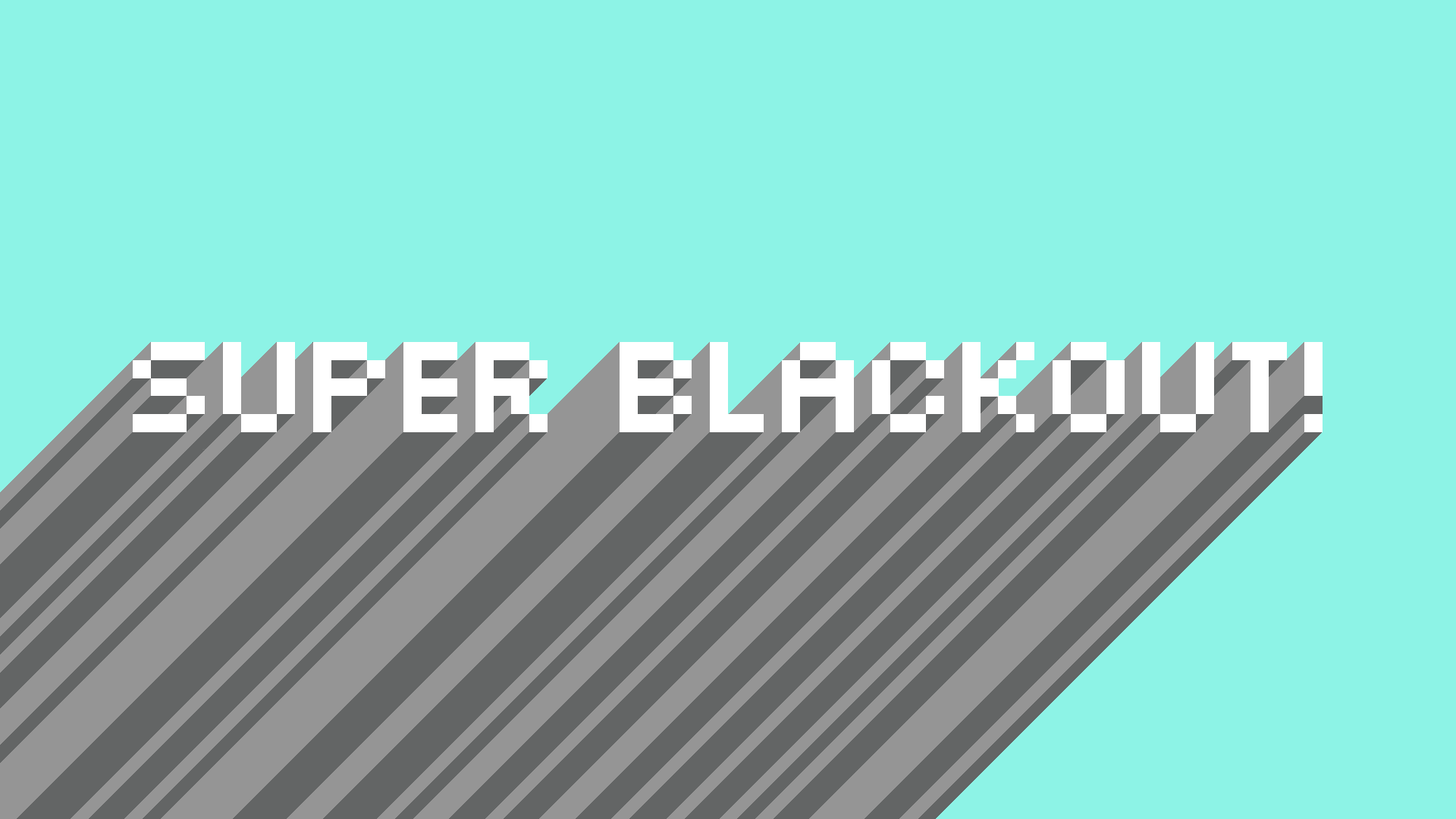
<style>
.page{position:relative;width:1456px;height:819px;background:#8df3e6}
.page>*{position:absolute;margin:0}
.t1{font:151.7px "Silkscreen";letter-spacing:-0.12em;color:#ffffff}
</style>
<div class="page">
<p class="t1" style="left:133px;top:342px;width:1190px;height:90px">Super blackout!</p>
</div>
